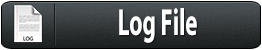
<style>
.page{position:relative;width:262px;height:50px}
.page>*{position:absolute;margin:0}
.t1{font:38px "MyriadPro-Bold";color:#fefffe;scale:0.6 1}
</style>
<div class="page">
<p class="t1" style="left:119px;top:8px;width:78px;height:35px">Log File</p>
</div>
